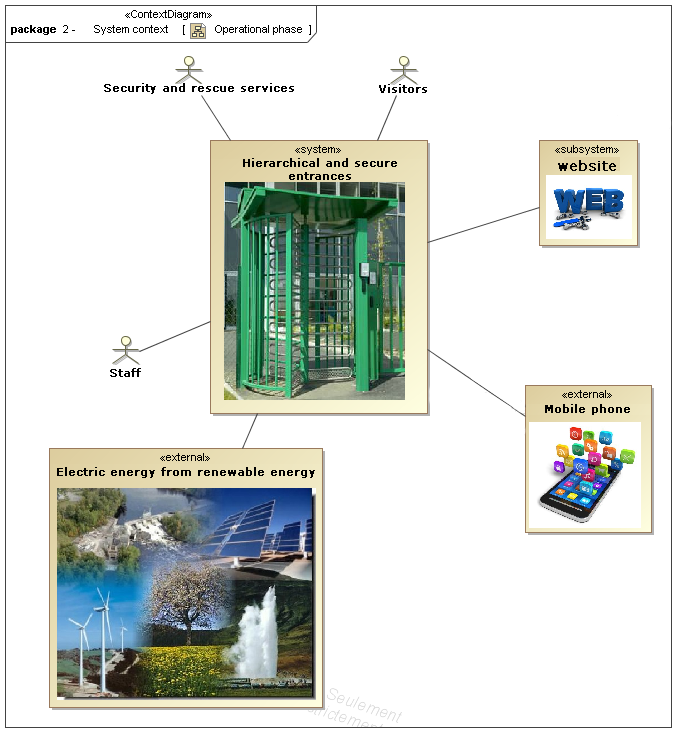
<style>
.page{position:relative;width:686px;height:742px;background:#ffffff}
.page>*{position:absolute;margin:0}
.t1{font:11px "ArialMT";color:#000000}
.t2{font:11px "Verdana";color:#000000;font-weight:bold}
</style>
<div class="page">
<p class="t1" style="left:94px;top:25px;width:74px;height:10px">System context</p>
<p class="t1" style="left:215px;top:25px;width:87px;height:10px">Operational phase</p>
<p class="t2" style="left:104px;top:83px;width:190px;height:11px">Security and rescue services</p>
<p class="t2" style="left:379px;top:84px;width:48px;height:9px">Visitors</p>
<p class="t2" style="left:243px;top:158px;width:154px;height:22px;text-align:center">Hierarchical and secure <br>entrances</p>
<p class="t2" style="left:110px;top:368px;width:31px;height:9px">Staff</p>
<p class="t2" style="left:545px;top:404px;width:85px;height:11px">Mobile phone</p>
<p class="t2" style="left:57px;top:467px;width:258px;height:11px">Electric energy from renewable energy</p>
</div>
